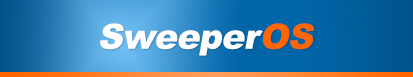
<style>
.page{position:relative;width:413px;height:77px}
.page>*{position:absolute;margin:0}
.t1{font:34.7px "Arial-Black";letter-spacing:-0.02em;color:#ffffff;font-style:italic}
.t2{font:34.7px "Arial-Black";letter-spacing:-0.02em;color:#ff6600;font-style:italic}
</style>
<div class="page">
<p class="t1" style="left:100px;top:23px;width:163px;height:33px">Sweeper</p>
<p class="t2" style="left:263px;top:23px;width:51px;height:27px">OS</p>
</div>
